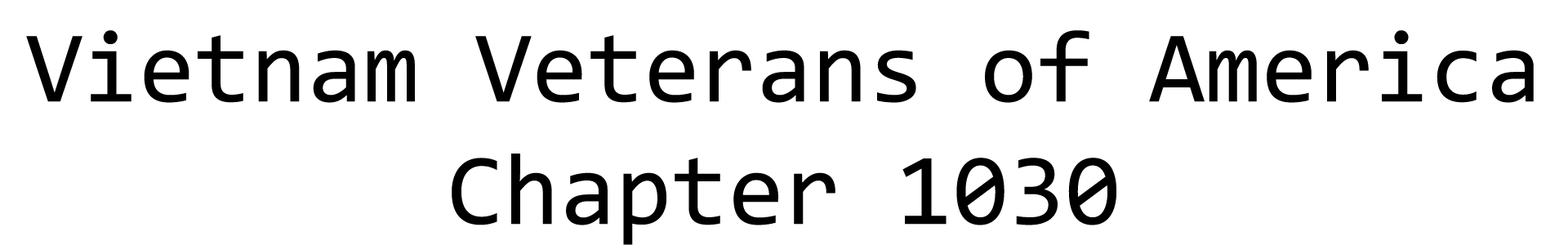
<style>
.page{position:relative;width:1568px;height:245px;background:#ffffff}
.page>*{position:absolute;margin:0}
.t1{font:102.1px "Consolas";color:#000000}
</style>
<div class="page">
<p class="t1" style="left:26px;top:30px;width:1508px;height:215px;text-align:center">Vietnam Veterans of America<br>Chapter 1030</p>
</div>
